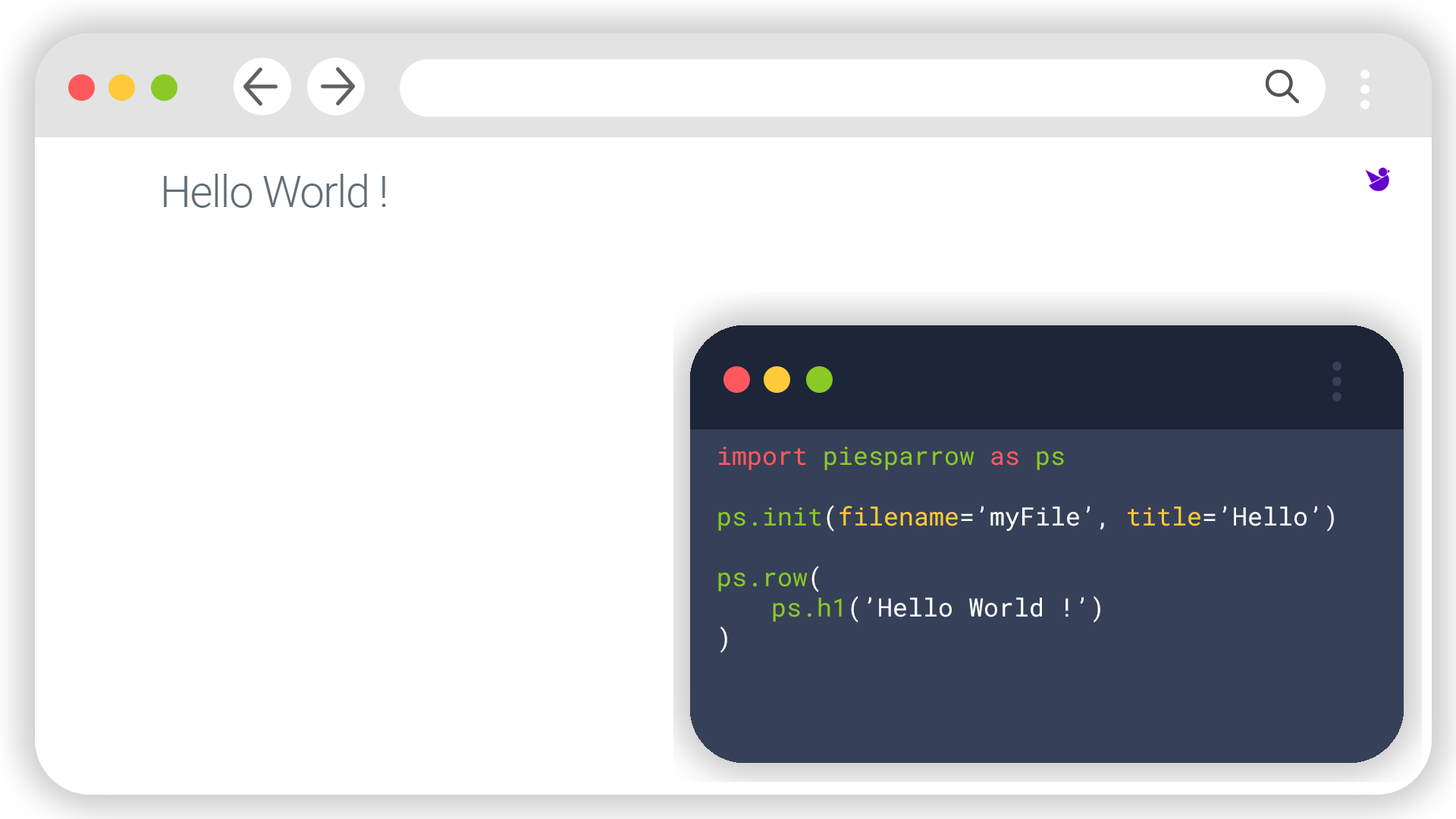
<style>
.page{position:relative;width:1456px;height:819px;background:#ffffff}
.page>*{position:absolute;margin:0}
.t1{font:25.3px "RobotoMono-Regular";color:#ffffff}
.t2{font:25.3px "RobotoMono-Regular";color:#ff595e}
.t3{font:25.3px "RobotoMono-Regular";color:#8ac926}
.t4{font:25.3px "RobotoMono-Regular";color:#ffca3a}
</style>
<div class="page">
<p class="t1" style="left:718px;top:447px;width:616px;height:206px"><span class="t2">import </span><span class="t3">piesparrow </span><span class="t2">as </span><span class="t3">ps<br><br>ps.init</span>(<span class="t4">filename</span>=’myFile’, <span class="t4">title</span>=’Hello’)<br><br><span class="t3">ps.row</span>(<br>  <span class="t3">ps.h1</span>(’Hello World !’)<br>)</p>
</div>
